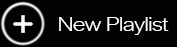
<style>
.page{position:relative;width:177px;height:47px;background:#020202}
.page>*{position:absolute;margin:0}
.t1{font:19.8px "ArialNova-Light";letter-spacing:-0.04em;color:#ffffff;scale:1.2 1}
</style>
<div class="page">
<p class="t1" style="left:59px;top:17px;width:110px;height:18px">New Playlist</p>
</div>
